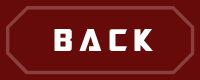
<style>
.page{position:relative;width:200px;height:80px;background:#660a0a}
.page>*{position:absolute;margin:0}
.t1{font:35px "TransformersMovie";letter-spacing:0.2em;color:#ffffff}
</style>
<div class="page">
<p class="t1" style="left:54px;top:29px;width:99px;height:22px">back</p>
</div>
